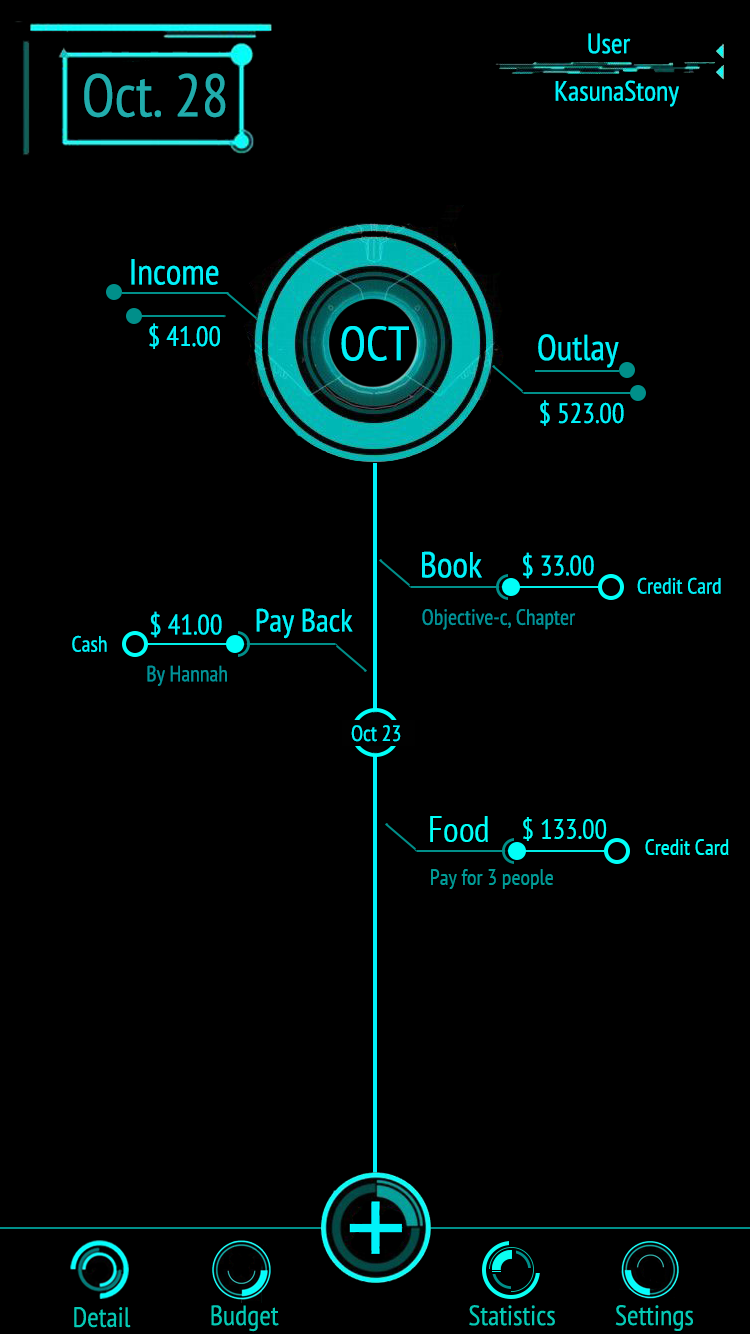
<style>
.page{position:relative;width:750px;height:1334px;background:#000000}
.page>*{position:absolute;margin:0}
.t1{font:28px "PTSans-Narrow";color:#00f1f9}
.t2{font:60px "PTSans-Narrow";color:#21acac}
.t3{font:36px "PTSans-Narrow";color:#00f1f9}
.t4{font:48px "PTSans-Narrow";color:#00f1f9}
.t5{font:22px "PTSans-Narrow";color:#00f1f9}
.t6{font:32px "PTSans-Narrow";color:#00f1f9}
.t7{font:22px "PTSans-Narrow";color:#009499}
.t8{font:36px "PTSans-Narrow";color:#00fff8}
.t9{font:28px "PTSans-Narrow";color:#00fff8}
.t10{font:22px "PTSans-Narrow";color:#00fff8}
.t11{font:22px "PTSans-Narrow";color:#009d98}
</style>
<div class="page">
<p class="t1" style="left:588px;top:33px;width:43px;height:21px">User</p>
<p class="t2" style="left:84px;top:73px;width:142px;height:45px">Oct. 28</p>
<p class="t1" style="left:555px;top:80px;width:124px;height:27px">KasunaStony</p>
<p class="t3" style="left:131px;top:259px;width:88px;height:26px">Income</p>
<p class="t1" style="left:149px;top:323px;width:71px;height:26px">$ 41.00</p>
<p class="t4" style="left:341px;top:326px;width:68px;height:35px">OCT</p>
<p class="t3" style="left:538px;top:334px;width:81px;height:34px">Outlay</p>
<p class="t1" style="left:540px;top:400px;width:84px;height:26px">$ 523.00</p>
<p class="t3" style="left:422px;top:551px;width:60px;height:27px">Book</p>
<p class="t1" style="left:523px;top:552px;width:71px;height:27px">$ 33.00</p>
<p class="t5" style="left:637px;top:577px;width:84px;height:17px">Credit Card</p>
<p class="t1" style="left:150px;top:611px;width:72px;height:27px">$ 41.00</p>
<p class="t6" style="left:256px;top:608px;width:97px;height:31px">Pay Back</p>
<p class="t7" style="left:422px;top:609px;width:154px;height:21px">Objective-c, Chapter</p>
<p class="t5" style="left:72px;top:635px;width:35px;height:17px">Cash</p>
<p class="t7" style="left:147px;top:665px;width:80px;height:21px">By Hannah</p>
<p class="t5" style="left:351px;top:725px;width:50px;height:17px">Oct 23</p>
<p class="t8" style="left:430px;top:816px;width:58px;height:26px">Food</p>
<p class="t9" style="left:523px;top:817px;width:84px;height:24px">$ 133.00</p>
<p class="t10" style="left:645px;top:839px;width:84px;height:16px">Credit Card</p>
<p class="t11" style="left:431px;top:869px;width:122px;height:20px">Pay for 3 people</p>
</div>
